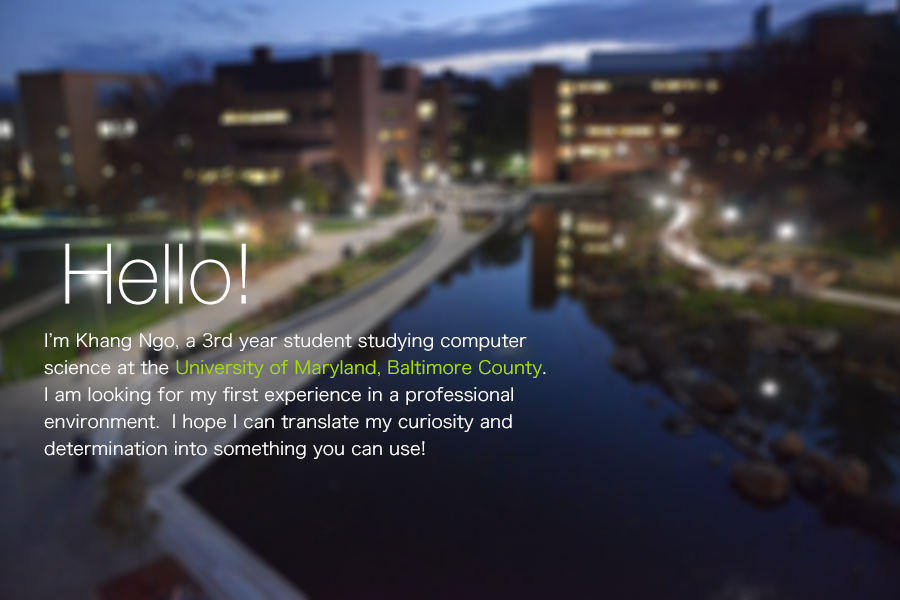
<style>
.page{position:relative;width:900px;height:600px}
.page>*{position:absolute;margin:0}
.t1{font:83.6px "HelveticaNeue-Thin";color:#ffffff}
.t2{font:18px/27px "HiraKakuPro-W3";color:#ffffff}
.t3{font:18px/27px "HiraKakuPro-W3";color:#a5dc00}
</style>
<div class="page">
<p class="t1" style="left:65px;top:243px;width:181px;height:62px">Hello!</p>
<p class="t2" style="left:44px;top:333px;width:502px;height:126px">I’m Khang Ngo, a 3rd year student studying computer <br>science at the <span class="t3">University of Maryland, Baltimore County</span>.<br>I am looking for my first experience in a professional<br>environment.  I hope I can translate my curiosity and<br>determination into something you can use!</p>
</div>
